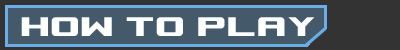
<style>
.page{position:relative;width:400px;height:50px;background:#44596a}
.page>*{position:absolute;margin:0}
.t1{font:30px "SpaceMarineNominal";color:#feffff}
</style>
<div class="page">
<p class="t1" style="left:21px;top:17px;width:294px;height:19px">HOW TO PLAY</p>
</div>
